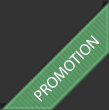
<style>
.page{position:relative;width:109px;height:110px;background:#333333}
.page>*{position:absolute;margin:0}
.t1{font:16px "MyriadPro-Regular";color:#ffffff}
</style>
<div class="page">
<p class="t1" style="left:33px;top:35px;width:67px;height:67px;rotate:-45deg">PROMOTION</p>
</div>
